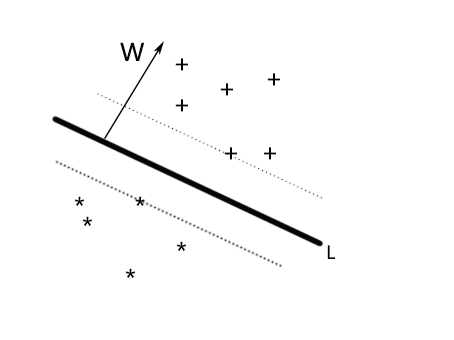
<style>
.page{position:relative;width:454px;height:340px;background:#ffffff}
.page>*{position:absolute;margin:0}
.t1{font:24px "MicrosoftYaHei";color:#050505}
.t2{font:18px "MicrosoftYaHei";color:#050505}
</style>
<div class="page">
<p class="t1" style="left:120px;top:42px;width:25px;height:19px">W</p>
<p class="t1" style="left:175px;top:58px;width:13px;height:13px">+</p>
<p class="t1" style="left:267px;top:73px;width:13px;height:13px">+</p>
<p class="t1" style="left:220px;top:83px;width:13px;height:13px">+</p>
<p class="t1" style="left:175px;top:99px;width:13px;height:13px">+</p>
<p class="t1" style="left:224px;top:147px;width:52px;height:13px">+   +</p>
<p class="t1" style="left:74px;top:196px;width:71px;height:10px">*       *</p>
<p class="t1" style="left:82px;top:216px;width:10px;height:10px">*</p>
<p class="t1" style="left:176px;top:241px;width:10px;height:10px">*</p>
<p class="t2" style="left:327px;top:245px;width:8px;height:14px">L</p>
<p class="t1" style="left:125px;top:268px;width:10px;height:10px">*</p>
</div>
